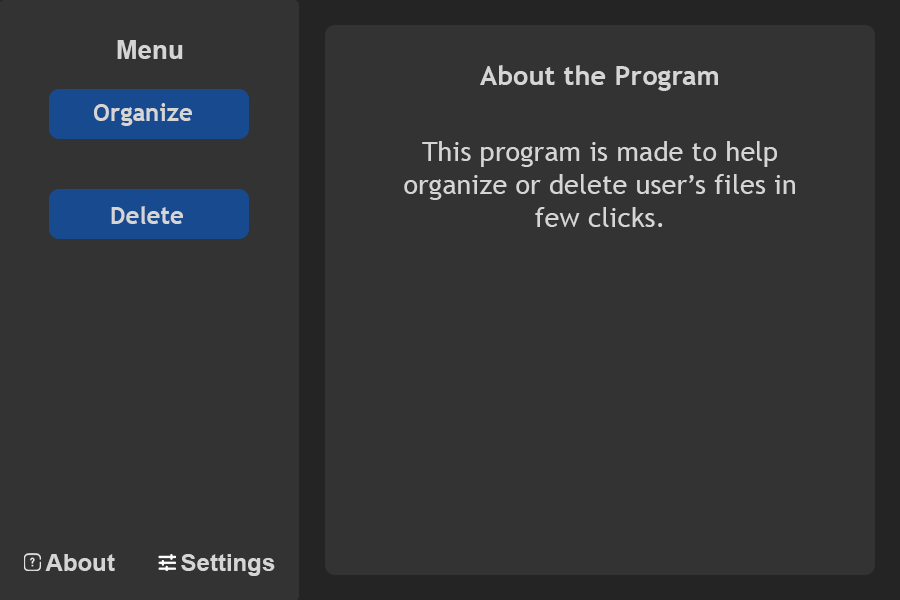
<style>
.page{position:relative;width:900px;height:600px;background:#333333}
.page>*{position:absolute;margin:0}
.t1{font:26px "Arial-BoldMT";color:#d6d6d6}
.t2{font:27.3px "TrebuchetMS-Bold";color:#d6d6d6}
.t3{font:24px "TrebuchetMS-Bold";color:#d6d6d6}
.t4{font:27.3px "TrebuchetMS";color:#d6d6d6}
.t5{font:24px "Arial-BoldMT";color:#d6d6d6}
</style>
<div class="page">
<p class="t1" style="left:117px;top:40px;width:66px;height:19px">Menu</p>
<p class="t2" style="left:480px;top:65px;width:238px;height:26px">About the Program</p>
<p class="t3" style="left:94px;top:103px;width:98px;height:23px">Organize</p>
<p class="t4" style="left:404px;top:141px;width:391px;height:86px;text-align:center">This program is made to help organize or delete user’s files in few clicks.</p>
<p class="t3" style="left:111px;top:206px;width:72px;height:18px">Delete</p>
<p class="t5" style="left:45px;top:554px;width:70px;height:17px">About</p>
<p class="t5" style="left:181px;top:554px;width:94px;height:22px">Settings</p>
</div>
